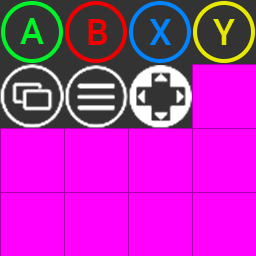
<style>
.page{position:relative;width:256px;height:256px;background:#ff00ff}
.page>*{position:absolute;margin:0}
.t1{font:36px "Roboto-Medium";color:#00f328}
.t2{font:36px "Roboto-Medium";color:#f20000}
.t3{font:36px "Roboto-Medium";color:#0084ff}
.t4{font:36px "Roboto-Medium";color:#e7ea00}
</style>
<div class="page">
<p class="t1" style="left:20px;top:18px;width:24px;height:26px">A</p>
<p class="t2" style="left:88px;top:19px;width:19px;height:26px">B</p>
<p class="t3" style="left:149px;top:19px;width:23px;height:26px">X</p>
<p class="t4" style="left:213px;top:19px;width:22px;height:26px">Y</p>
</div>
